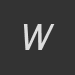
<style>
.page{position:relative;width:75px;height:75px;background:#333333}
.page>*{position:absolute;margin:0}
.t1{font:36px "LucidaSans-Italic";color:#dddddd}
</style>
<div class="page">
<p class="t1" style="left:23px;top:24px;width:32px;height:26px">W</p>
</div>
